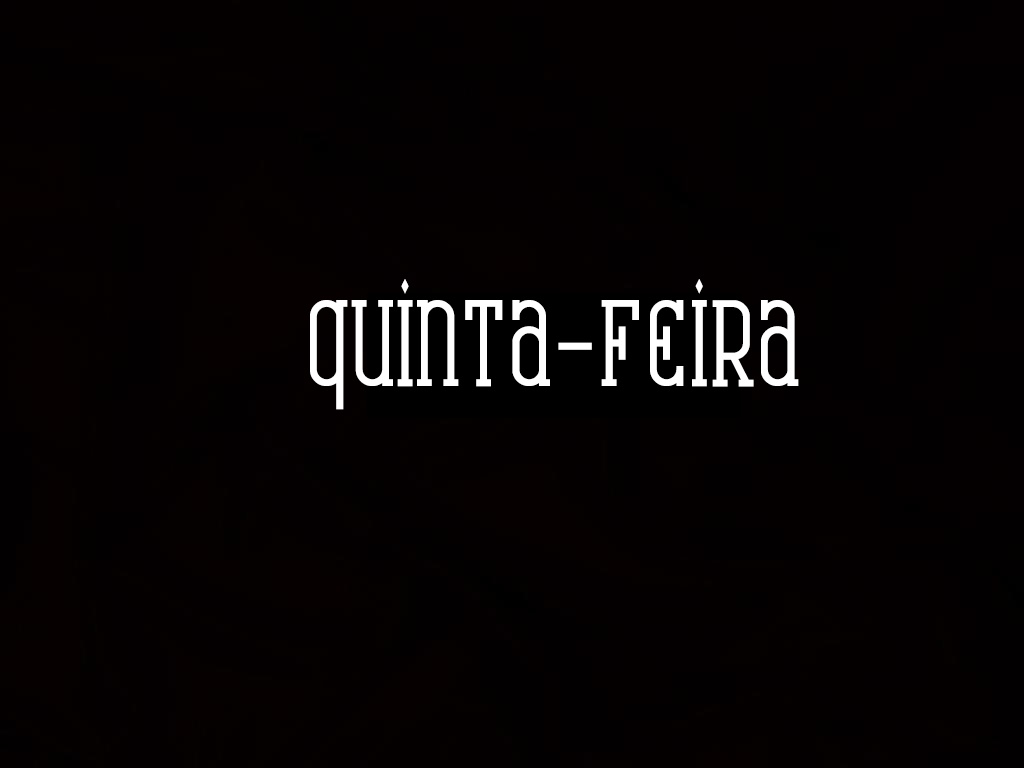
<style>
.page{position:relative;width:1024px;height:768px;background:#040000}
.page>*{position:absolute;margin:0}
.t1{font:132px "CatharsisRequiemBold";letter-spacing:-0.003em;color:#ffffff}
</style>
<div class="page">
<p class="t1" style="left:310px;top:279px;width:489px;height:131px">quinta-feira</p>
</div>
